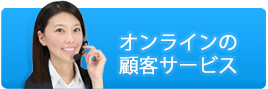
<style>
.page{position:relative;width:268px;height:89px}
.page>*{position:absolute;margin:0}
.t1{font:19px "KozGoPr6N-Regular";color:#fdfeff;font-weight:bold}
</style>
<div class="page">
<p class="t1" style="left:119px;top:33px;width:118px;height:42px">オンラインの<br>顧客サービス</p>
</div>
